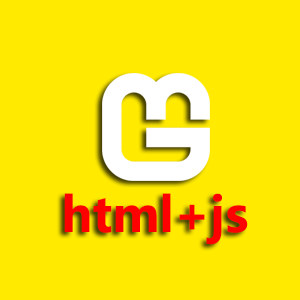
<style>
.page{position:relative;width:300px;height:300px;background:#ffea00}
.page>*{position:absolute;margin:0}
.t1{font:48px "MicrosoftYaHei-Bold";color:#ff0000}
</style>
<div class="page">
<p class="t1" style="left:64px;top:193px;width:184px;height:52px">html+js</p>
</div>
